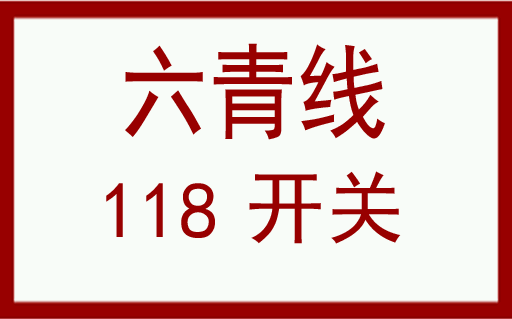
<style>
.page{position:relative;width:512px;height:319px;background:#f8fcf8}
.page>*{position:absolute;margin:0}
.t1{font:104.7px "SimHei";color:#980000;scale:0.85 1}
.t2{font:80.2px "SimHei";color:#980000}
</style>
<div class="page">
<p class="t1" style="left:125px;top:43px;width:260px;height:97px">六青线</p>
<p class="t2" style="left:249px;top:171px;width:152px;height:73px">开关</p>
<p class="t2" style="left:106px;top:183px;width:109px;height:55px">118</p>
</div>
